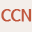
<style>
.page{position:relative;width:32px;height:32px;background:#f3eeea}
.page>*{position:absolute;margin:0}
.t1{font:17px "Cabin-Regular";letter-spacing:-0.025em;color:#c1573c;font-weight:bold;scale:0.95 1}
</style>
<div class="page">
<p class="t1" style="left:1px;top:9px;width:31px;height:13px">CCN</p>
</div>
